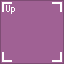
<style>
.page{position:relative;width:64px;height:64px;background:#a06194}
.page>*{position:absolute;margin:0}
.t1{font:10px "SourceCodePro-Regular";color:#ffffff}
</style>
<div class="page">
<p class="t1" style="left:6px;top:5px;width:9px;height:9px">Up</p>
</div>
